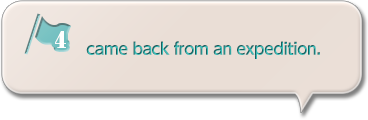
<style>
.page{position:relative;width:368px;height:120px;background:#eaded6}
.page>*{position:absolute;margin:0}
.t1{font:16px "UDShinGoPro-DeBold";letter-spacing:-0.04em}
</style>
<div class="page">
<p class="t1" style="left:86px;top:41px;width:234px;height:18px">came back from an expedition.</p>
</div>
